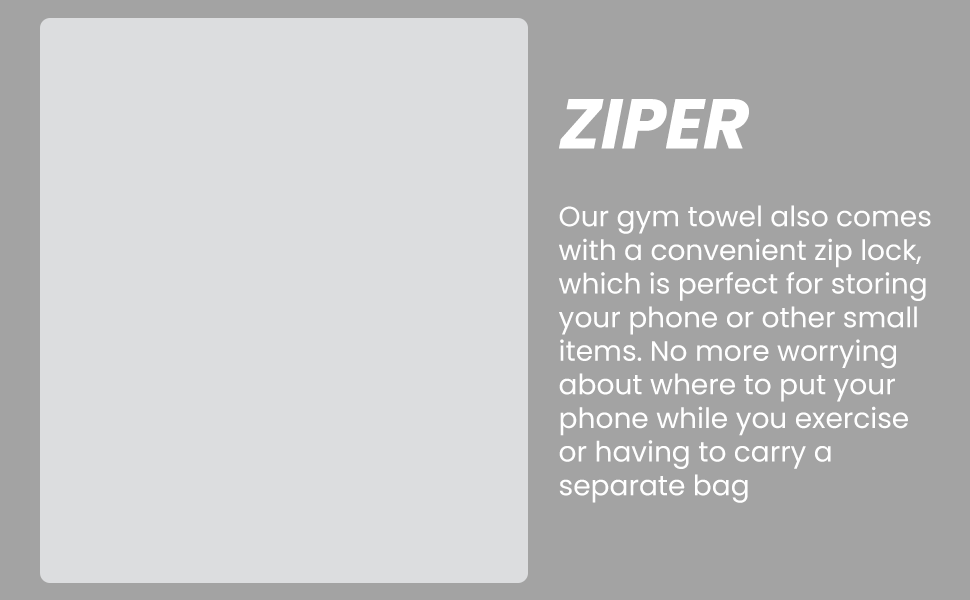
<style>
.page{position:relative;width:970px;height:600px;background:#a3a3a3}
.page>*{position:absolute;margin:0}
.t1{font:70px "Poppins-Bold";color:#ffffff;text-transform:uppercase;font-style:italic}
.t2{font:28px "Poppins-Regular";color:#ffffff}
</style>
<div class="page">
<p class="t1" style="left:559px;top:99px;width:190px;height:50px">ZIPER</p>
<p class="t2" style="left:559px;top:205px;width:372px;height:298px">Our gym towel also comes<br>with a convenient zip lock, <br>which is perfect for storing <br>your phone or other small <br>items. No more worrying <br>about where to put your <br>phone while you exercise <br>or having to carry a <br>separate bag</p>
</div>
